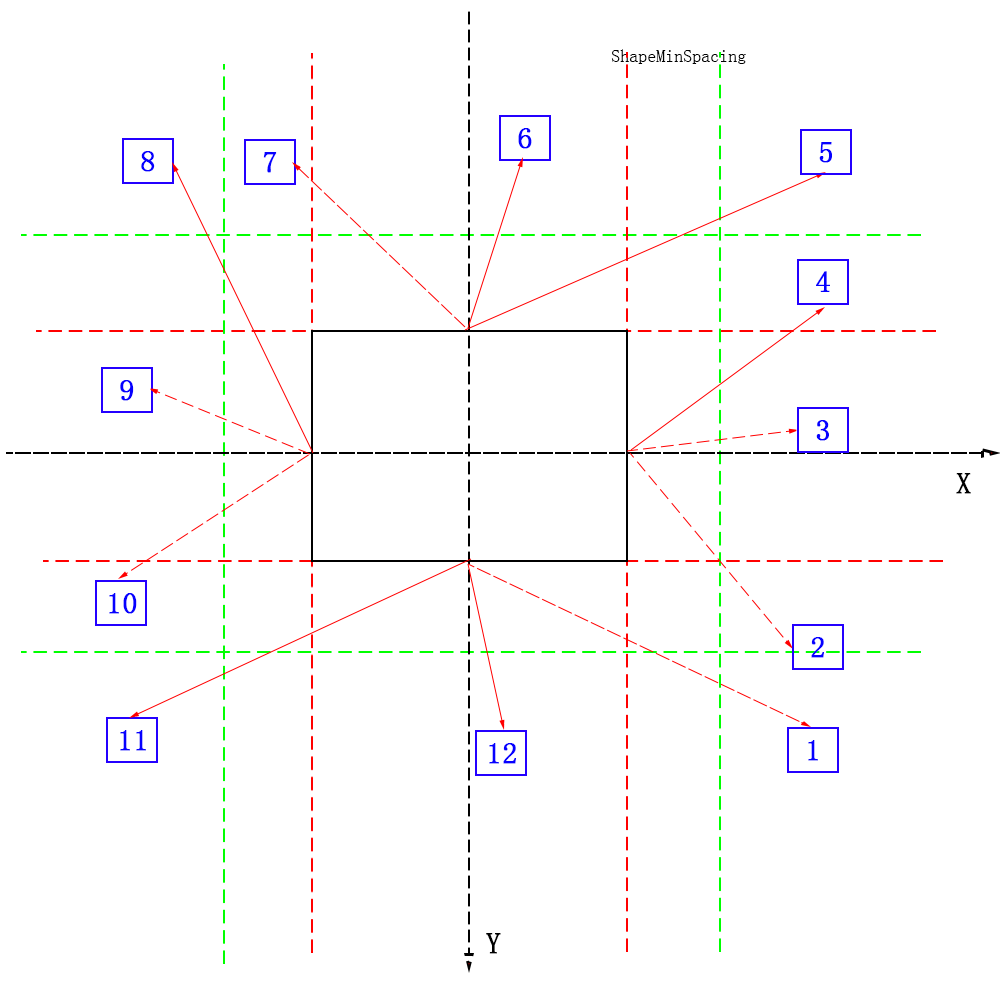
<style>
.page{position:relative;width:1000px;height:1000px;background:#ffffff}
.page>*{position:absolute;margin:0}
.t1{font:18px "YouYuan";color:#000000}
.t2{font:30px "YouYuan";color:#0600ff;font-weight:bold}
.t3{font:30px "YouYuan";color:#010000;font-weight:bold}
.t4{font:30px "YouYuan";color:#000000;font-weight:bold}
</style>
<div class="page">
<p class="t1" style="left:611px;top:49px;width:135px;height:15px">ShapeMinSpacing</p>
<p class="t2" style="left:518px;top:128px;width:14px;height:21px">6</p>
<p class="t2" style="left:819px;top:142px;width:13px;height:21px">5</p>
<p class="t2" style="left:141px;top:151px;width:14px;height:21px">8</p>
<p class="t2" style="left:263px;top:152px;width:14px;height:21px">7</p>
<p class="t2" style="left:816px;top:271px;width:14px;height:21px">4</p>
<p class="t2" style="left:120px;top:380px;width:14px;height:21px">9</p>
<p class="t2" style="left:816px;top:420px;width:13px;height:21px">3</p>
<p class="t3" style="left:956px;top:473px;width:15px;height:21px">X</p>
<p class="t2" style="left:109px;top:593px;width:28px;height:21px">10</p>
<p class="t2" style="left:811px;top:637px;width:13px;height:21px">2</p>
<p class="t2" style="left:120px;top:730px;width:26px;height:21px">11</p>
<p class="t2" style="left:489px;top:743px;width:27px;height:21px">12</p>
<p class="t2" style="left:808px;top:740px;width:10px;height:21px">1</p>
<p class="t4" style="left:486px;top:933px;width:15px;height:21px">Y</p>
</div>
